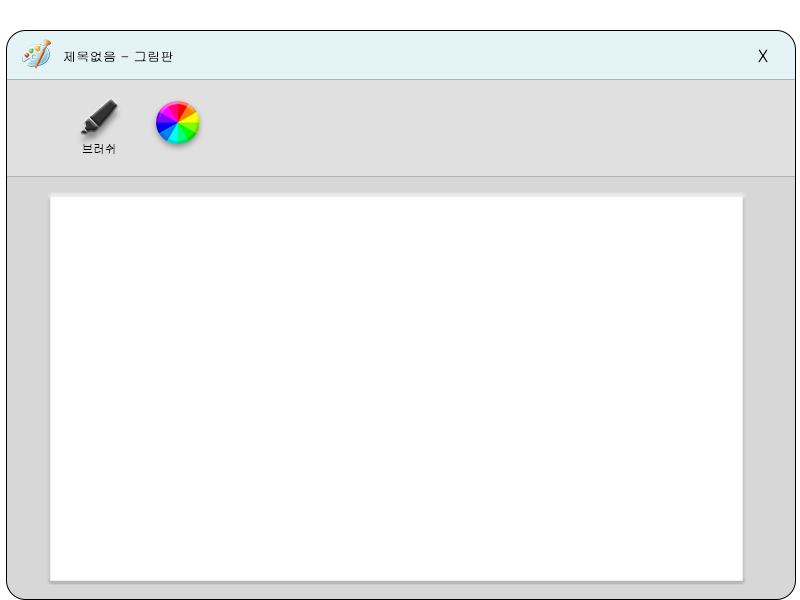
<style>
.page{position:relative;width:800px;height:600px;background:#ffffff}
.page>*{position:absolute;margin:0}
.t1{font:12.5px "Gulim";color:#000000;scale:1.07 1}
.t2{font:16.7px "Gulim";color:#000000}
.t3{font:11.5px "Gulim";color:#000000}
</style>
<div class="page">
<p class="t1" style="left:64px;top:51px;width:109px;height:11px">제목없음 - 그림판</p>
<p class="t2" style="left:758px;top:49px;width:10px;height:14px">X</p>
<p class="t3" style="left:82px;top:144px;width:33px;height:10px">브러쉬</p>
</div>
